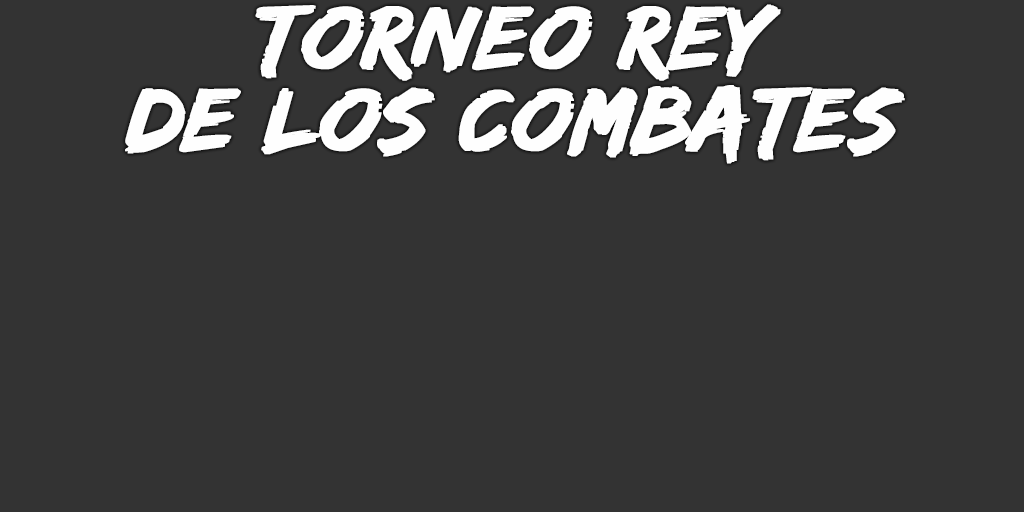
<style>
.page{position:relative;width:1024px;height:512px;background:#333333}
.page>*{position:absolute;margin:0}
.t1{font:93px/82px "EdoSZ";color:#fefefe;font-weight:bold;font-style:italic;scale:1.04 1}
</style>
<div class="page">
<p class="t1" style="left:125px;top:4px;width:780px;height:160px;text-align:center">torneo rey<br>de los combates</p>
</div>
